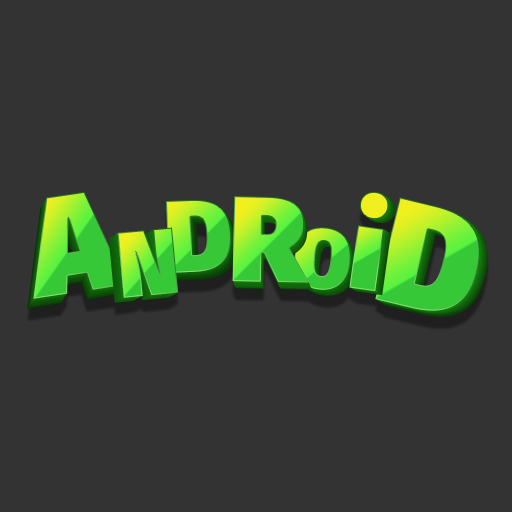
<style>
.page{position:relative;width:512px;height:512px;background:#333333}
.page>*{position:absolute;margin:0}
.t1{font:140.3px "FiraSans-Ultra"}
.t2{font:121.6px "FiraSans-Ultra"}
.t3{font:116.9px "FiraSans-Ultra"}
.t4{font:149.7px "FiraSans-Ultra"}
.t5{font:102.9px "FiraSans-Ultra"}
.t6{font:93.5px "FiraSans-Ultra"}
.t7{font:84.2px "FiraSans-Ultra"}
</style>
<div class="page">
<p class="t1" style="left:33px;top:191px;width:94px;height:108px;rotate:-9deg">A</p>
<p class="t2" style="left:232px;top:196px;width:77px;height:87px;rotate:1deg">R</p>
<p class="t3" style="left:349px;top:191px;width:40px;height:101px;rotate:8deg">i</p>
<p class="t4" style="left:375px;top:197px;width:105px;height:114px;rotate:14deg">D</p>
<p class="t5" style="left:165px;top:199px;width:66px;height:74px;rotate:-3deg">D</p>
<p class="t6" style="left:117px;top:227px;width:62px;height:71px;rotate:-5deg">N</p>
<p class="t7" style="left:294px;top:227px;width:57px;height:63px;rotate:5deg">O</p>
</div>
